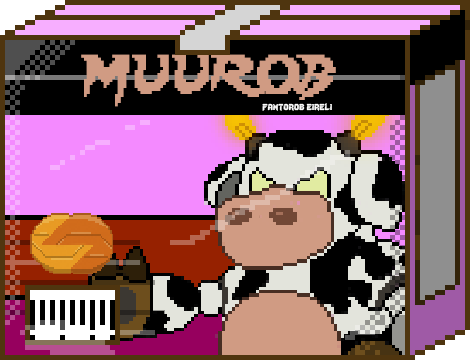
<style>
.page{position:relative;width:470px;height:360px}
.page>*{position:absolute;margin:0}
.t1{font:48.3px "Lady-Radical";color:#d09b83;scale:0.93 1}
.t2{font:12px "Lady-Radical";color:#fbfbfb}
</style>
<div class="page">
<p class="t1" style="left:81px;top:54px;width:255px;height:53px">MUUROB</p>
<p class="t2" style="left:262px;top:103px;width:70px;height:8px">fantorob eireli</p>
</div>
